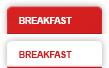
<style>
.page{position:relative;width:109px;height:68px;background:#ffffff}
.page>*{position:absolute;margin:0}
.t1{font:9px "Arial-BoldMT";letter-spacing:-0.025em;color:#ffffff}
.t2{font:9px "Arial-BoldMT";letter-spacing:-0.025em;color:#d31f1f}
</style>
<div class="page">
<p class="t1" style="left:19px;top:17px;width:53px;height:7px">BREAKFAST</p>
<p class="t2" style="left:19px;top:51px;width:53px;height:7px">BREAKFAST</p>
</div>
